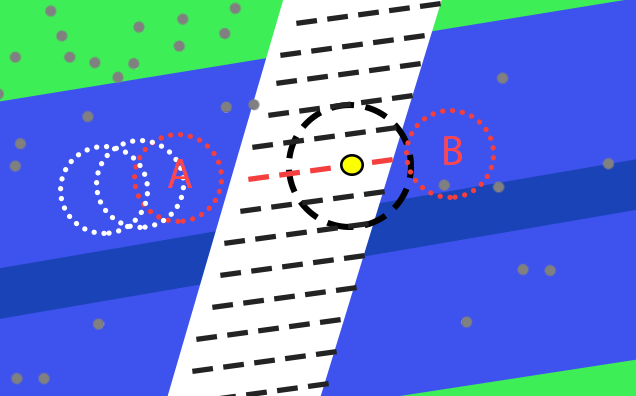
<style>
.page{position:relative;width:636px;height:396px;background:#3e52ee}
.page>*{position:absolute;margin:0}
.t1{font:42.7px "MyriadPro-Regular";color:#ff4646}
</style>
<div class="page">
<p class="t1" style="left:444px;top:136px;width:18px;height:29px">B</p>
<p class="t1" style="left:168px;top:159px;width:24px;height:29px">A</p>
</div>
